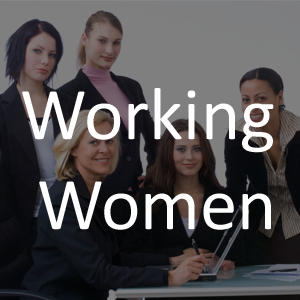
<style>
.page{position:relative;width:300px;height:300px}
.page>*{position:absolute;margin:0}
.t1{font:75px "Calibri";color:#ffffff}
</style>
<div class="page">
<p class="t1" style="left:22px;top:88px;width:252px;height:142px">Working <br> Women</p>
</div>
